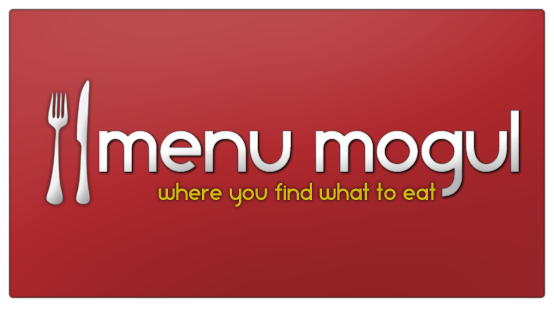
<style>
.page{position:relative;width:554px;height:309px}
.page>*{position:absolute;margin:0}
.t1{font:72px "StarAvenue"}
.t2{font:20px "StarAvenue";letter-spacing:0.025em;color:#cabd0d}
</style>
<div class="page">
<p class="t1" style="left:99px;top:110px;width:420px;height:87px">Menu Mogul</p>
<p class="t2" style="left:158px;top:182px;width:278px;height:25px">where you find what to eat</p>
</div>
